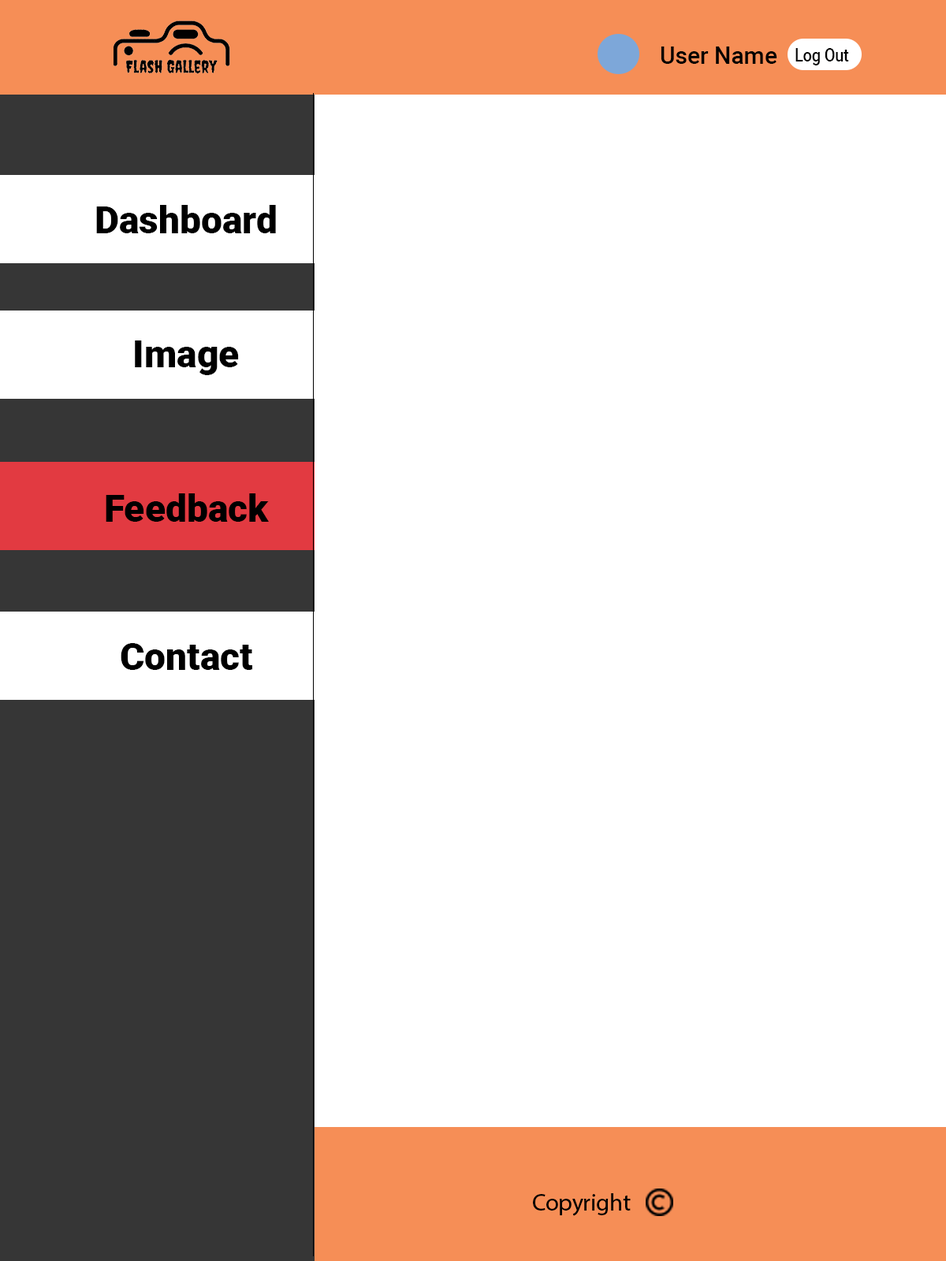
<style>
.page{position:relative;width:946px;height:1261px;background:#ffffff}
.page>*{position:absolute;margin:0}
.t1{font:23.6px "Roboto-Medium";color:#000000}
.t2{font:17.9px "Roboto-Medium";color:#000000;scale:0.86 1}
.t3{font:37.8px "Roboto-Black";color:#000000}
.t4{font:23.8px "MyriadHebrew-Regular";color:#000000}
</style>
<div class="page">
<p class="t1" style="left:660px;top:46px;width:117px;height:18px">User Name</p>
<p class="t2" style="left:795px;top:48px;width:54px;height:17px">Log Out</p>
<p class="t3" style="left:96px;top:205px;width:180px;height:28px">Dashboard</p>
<p class="t3" style="left:135px;top:340px;width:104px;height:35px">Image</p>
<p class="t3" style="left:106px;top:493px;width:163px;height:29px">Feedback</p>
<p class="t3" style="left:121px;top:643px;width:131px;height:27px">Contact</p>
<p class="t4" style="left:533px;top:1193px;width:97px;height:23px">Copyright</p>
</div>
